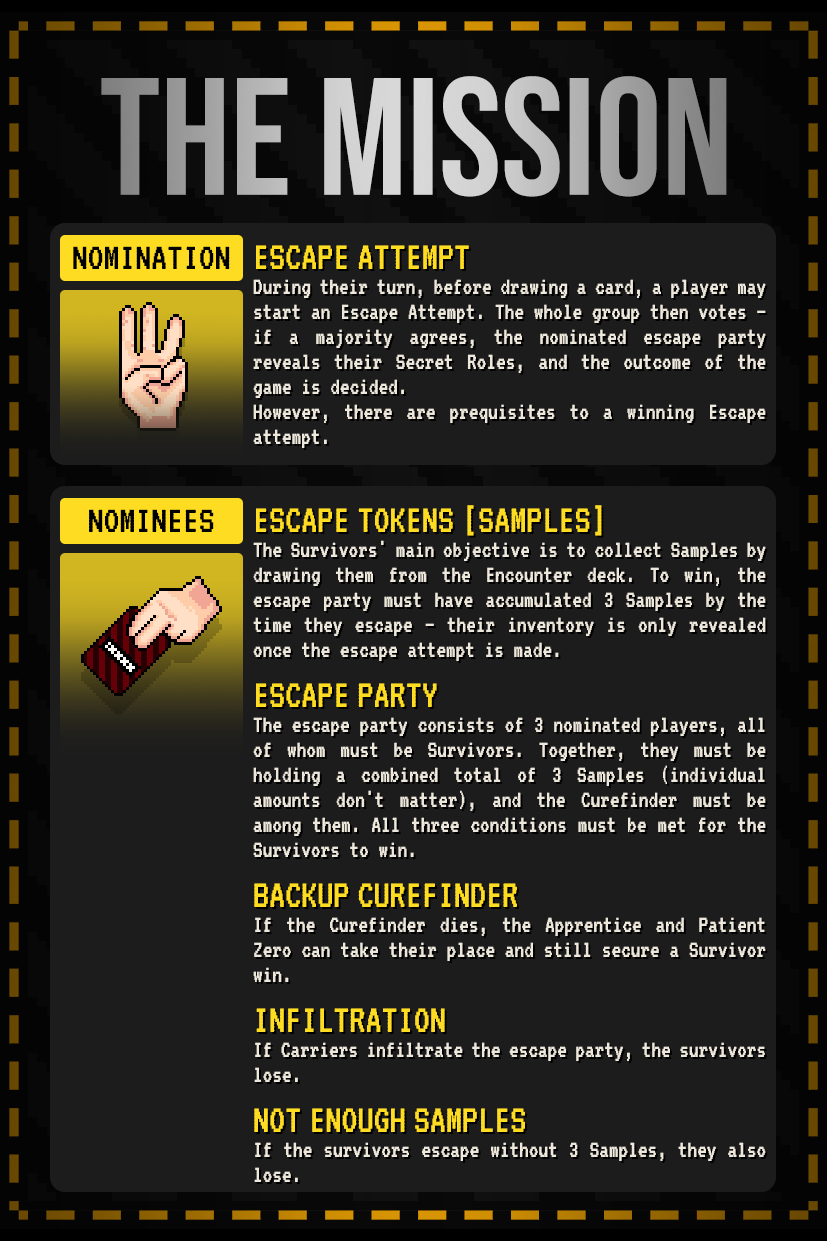
<style>
.page{position:relative;width:827px;height:1241px;background:#1c1c1c}
.page>*{position:absolute;margin:0}
.t1{font:166.7px "BebasNeue-Regular"}
.t2{font:39.7px "VT323-Regular";color:#000000}
.t3{font:25px/25px "VT323-Regular";color:#eee8dc;scale:0.96 1}
.t4{font:41.7px "VT323-Regular";color:#fedc22;scale:0.96 1}
</style>
<div class="page">
<p class="t1" style="left:101px;top:76px;width:626px;height:121px">THE MISSION</p>
<p class="t2" style="left:73px;top:246px;width:157px;height:23px">NOMINATION</p>
<p class="t3" style="left:253px;top:245px;width:513px;height:203px;text-align:justify"><span class="t4">ESCAPE ATTEMPT<br></span>During their turn, before drawing a card, a player may start an Escape Attempt. The whole group then votes — if a majority agrees, the nominated escape party reveals their Secret Roles, and the outcome of the game is decided.<br>However, there are prequisites to a winning Escape attempt.</p>
<p class="t2" style="left:89px;top:509px;width:125px;height:23px">NOMINEES</p>
<p class="t3" style="left:253px;top:505px;width:513px;height:677px;text-align:justify"><span class="t4">ESCAPE TOKENS [SAMPLES]<br></span>The Survivors' main objective is to collect Samples by drawing them from the Encounter deck. To win, the escape party must have accumulated 3 Samples by the time they escape — their inventory is only revealed once the escape attempt is made.<br><span class="t4">ESCAPE PARTY<br></span>The escape party consists of 3 nominated players, all of whom must be Survivors. Together, they must be holding a combined total of 3 Samples (individual amounts don't matter), and the Curefinder must be among them. All three conditions must be met for the Survivors to win.<br><span class="t4">BACKUP CUREFINDER<br></span>If the Curefinder dies, the Apprentice and Patient Zero can take their place and still secure a Survivor win.<br><span class="t4">INFILTRATION<br></span>If Carriers infiltrate the escape party, the survivors lose.<br><span class="t4">NOT ENOUGH SAMPLES<br></span>If the survivors escape without 3 Samples, they also lose.</p>
</div>
